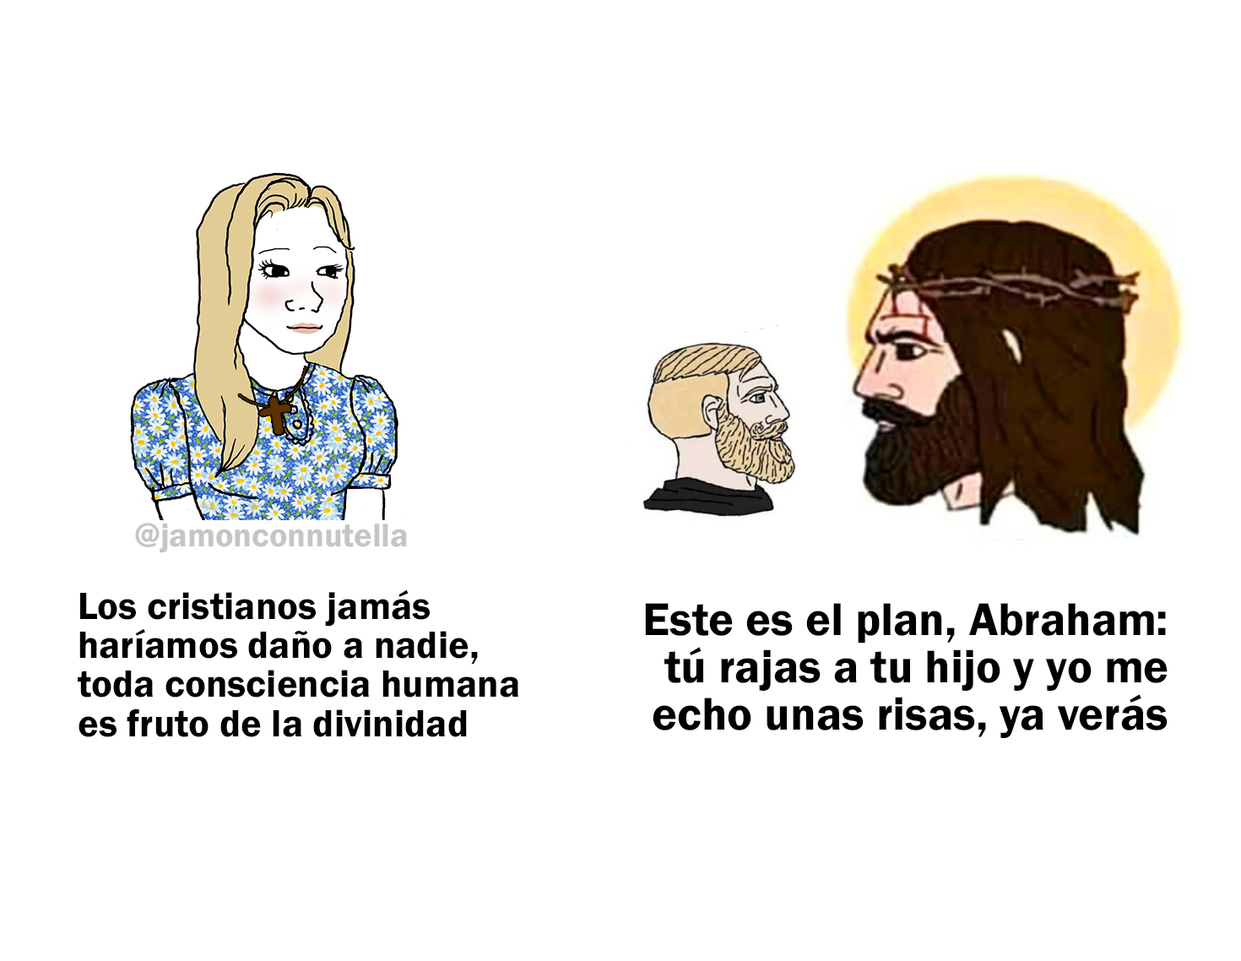
<style>
.page{position:relative;width:1241px;height:961px;background:#ffffff}
.page>*{position:absolute;margin:0}
.t1{font:33.7px "FranklinGothic-Demi";color:#c5c5c5}
.t2{font:39.3px "FranklinGothic-Demi";color:#000000}
.t3{font:47.4px "FranklinGothic-Demi";color:#000000}
</style>
<div class="page">
<p class="t1" style="left:135px;top:523px;width:272px;height:30px">@jamonconnutella</p>
<p class="t2" style="left:78px;top:589px;width:440px;height:148px">Los cristianos jamás<br>haríamos daño a nadie,<br>toda consciencia humana<br>es fruto de la divinidad</p>
<p class="t3" style="left:645px;top:603px;width:523px;height:135px;text-align:right">Este es el plan, Abraham:<br>tú rajas a tu hijo y yo me<br>echo unas risas, ya verás</p>
</div>
